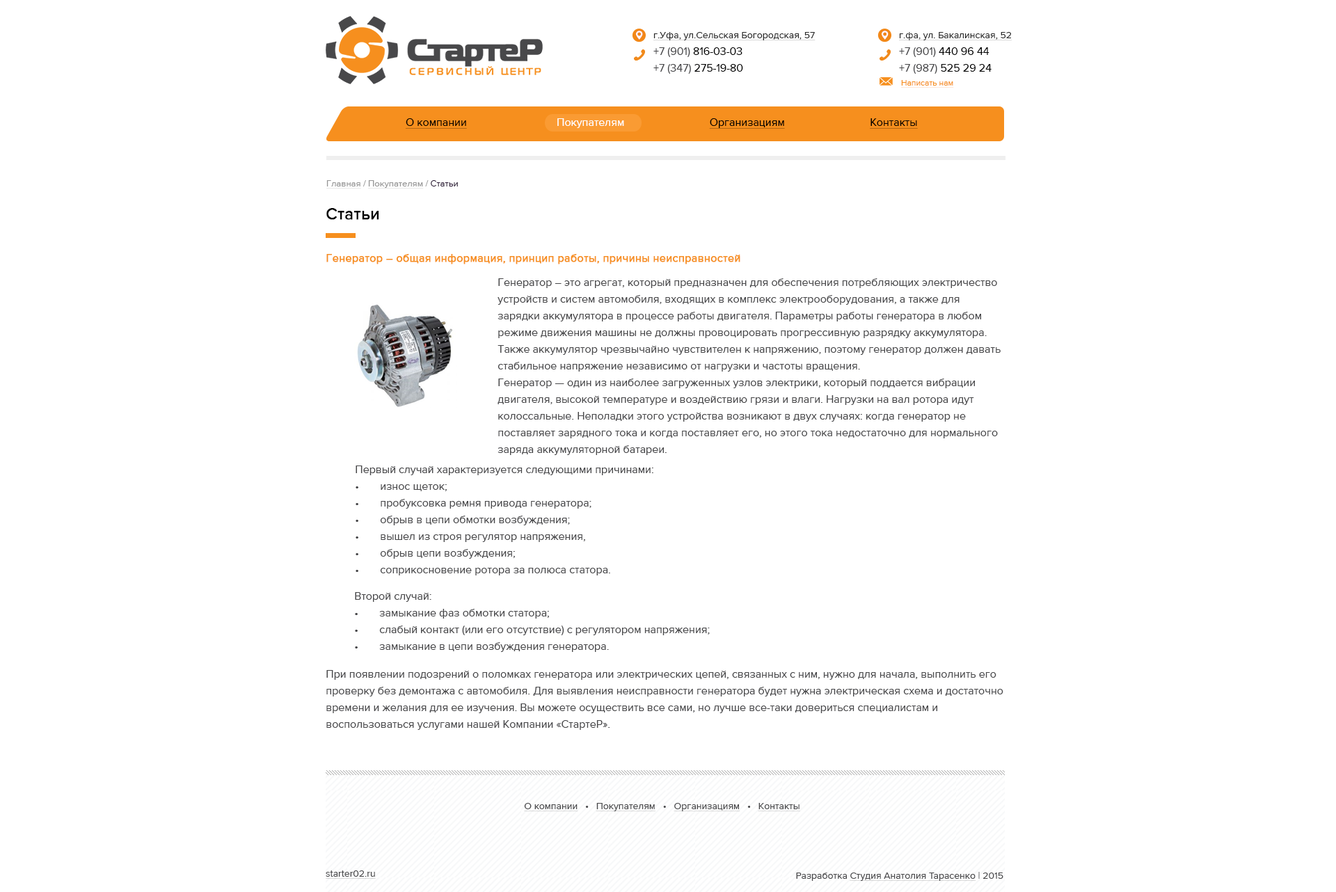
<style>
.page{position:relative;width:1336px;height:892px;background:#ffffff}
.page>*{position:absolute;margin:0}
.t1{font:9.7px/16.7px "amlgjlahnkgmkjoldgbpeifodofplkkf";color:#282828;text-decoration:underline}
.t2{font:11.1px/16.7px "amlgjlahnkgmkjoldgbpeifodofplkkf";color:#48484a}
.t3{font:11.1px/16.7px "amlgjlahnkgmkjoldgbpeifodofplkkf";color:#000000}
.t4{font:8.4px "amlgjlahnkgmkjoldgbpeifodofplkkf";color:#f68f1e;text-decoration:underline}
.t5{font:11.1px "amlgjlahnkgmkjoldgbpeifodofplkkf";color:#000000;text-decoration:underline}
.t6{font:11.1px "amlgjlahnkgmkjoldgbpeifodofplkkf";color:#ffffff}
.t7{font:9px "amlgjlahnkgmkjoldgbpeifodofplkkf";color:#969696;text-decoration:underline}
.t8{font:9px "amlgjlahnkgmkjoldgbpeifodofplkkf";color:#969696}
.t9{font:9px "amlgjlahnkgmkjoldgbpeifodofplkkf";color:#2c1a37}
.t10{font:16.7px "amlgjlahnkgmkjoldgbpeifodofplkkf";color:#010101;font-weight:bold}
.t11{font:11.1px "amlgjlahnkgmkjoldgbpeifodofplkkf";color:#f68f1e;font-weight:bold}
.t12{font:9.7px "amlgjlahnkgmkjoldgbpeifodofplkkf";color:#48484a;text-decoration:underline}
.t13{font:9.7px "amlgjlahnkgmkjoldgbpeifodofplkkf";color:#48484a}
</style>
<div class="page">
<p class="t1" style="left:654px;top:32px;width:162px;height:42px">г.Уфа, ул.Сельская Богородская, 57<br><span class="t2">+7 (901)</span><span class="t3"> 816-03-03<br></span><span class="t2">+7 (347)</span><span class="t3"> 275-19-80</span></p>
<p class="t1" style="left:899px;top:32px;width:113px;height:42px">г.фа, ул. Бакалинская, 52<br><span class="t2">+7 (901)</span><span class="t3"> 440 96 44<br></span><span class="t2">+7 (987)</span><span class="t3"> 525 29 24</span></p>
<p class="t4" style="left:901px;top:80px;width:53px;height:8px">Написать нам</p>
<p class="t5" style="left:405px;top:118px;width:62px;height:11px">О компании</p>
<p class="t5" style="left:558px;top:118px;width:360px;height:11px"><span class="t6">Покупателям      </span>Организациям      Контакты</p>
<p class="t7" style="left:326px;top:180px;width:132px;height:9px">Главная<span class="t8"> / </span>Покупателям<span class="t8"> /</span><span class="t9"> Статьи</span></p>
<p class="t10" style="left:326px;top:208px;width:53px;height:12px">Статьи</p>
<p class="t11" style="left:326px;top:254px;width:415px;height:10px">Генератор – общая информация, принцип работы, причины неисправностей</p>
<p class="t2" style="left:498px;top:278px;width:503px;height:177px">Генератор – это агрегат, который предназначен для обеспечения потребляющих электричество устройств и систем автомобиля, входящих в комплекс электрооборудования, а также для зарядки аккумулятора в процессе работы двигателя. Параметры работы генератора в любом режиме движения машины не должны провоцировать прогрессивную разрядку аккумулятора. Также аккумулятор чрезвычайно чувствителен к напряжению, поэтому генератор должен давать стабильное напряжение независимо от нагрузки и частоты вращения.<br>Генератор — один из наиболее загруженных узлов электрики, который поддается вибрации двигателя, высокой температуре и воздействию грязи и влаги. Нагрузки на вал ротора идут колоссальные. Неполадки этого устройства возникают в двух случаях: когда генератор не поставляет зарядного тока и когда поставляет его, но этого тока недостаточно для нормального заряда аккумуляторной батареи.</p>
<p class="t2" style="left:356px;top:466px;width:298px;height:110px">Первый случай характеризуется следующими причинами:<br>• износ щеток;<br>• пробуксовка ремня привода генератора;<br>• обрыв в цепи обмотки возбуждения;<br>• вышел из строя регулятор напряжения,<br>• обрыв цепи возбуждения;<br>• соприкосновение ротора за полюса статора.</p>
<p class="t2" style="left:355px;top:592px;width:355px;height:60px">Второй случай:<br>• замыкание фаз обмотки статора;<br>• слабый контакт (или его отсутствие) с регулятором напряжения;<br>• замыкание в цепи возбуждения генератора.</p>
<p class="t2" style="left:326px;top:670px;width:678px;height:60px">При появлении подозрений о поломках генератора или электрических цепей, связанных с ним, нужно для начала, выполнить его проверку без демонтажа с автомобиля. Для выявления неисправности генератора будет нужна электрическая схема и достаточно времени и желания для ее изучения. Вы можете осуществить все сами, но лучше все-таки довериться специалистам и воспользоваться услугами нашей Компании «СтартеР».</p>
<p class="t12" style="left:524px;top:803px;width:276px;height:9px">О компании<span class="t13">   •   </span>Покупателям<span class="t13">   •   </span>Организациям<span class="t13">   •   </span>Контакты</p>
<p class="t12" style="left:326px;top:871px;width:50px;height:8px">starter02.ru</p>
<p class="t12" style="left:796px;top:872px;width:208px;height:9px"><span class="t13">Разработка </span>Студия Анатолия Тарасенко<span class="t13"> | 2015</span></p>
</div>
